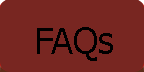
<style>
.page{position:relative;width:144px;height:72px;background:#782621}
.page>*{position:absolute;margin:0}
.t1{font:36px "Tahoma";color:#000000}
</style>
<div class="page">
<p class="t1" style="left:37px;top:27px;width:76px;height:34px">FAQs</p>
</div>
